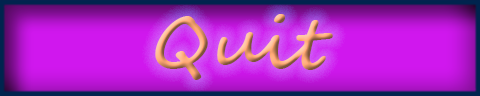
<style>
.page{position:relative;width:480px;height:96px}
.page>*{position:absolute;margin:0}
.t1{font:70.9px "SegoeScript-Bold"}
</style>
<div class="page">
<p class="t1" style="left:155px;top:14px;width:178px;height:66px">Quit</p>
</div>
